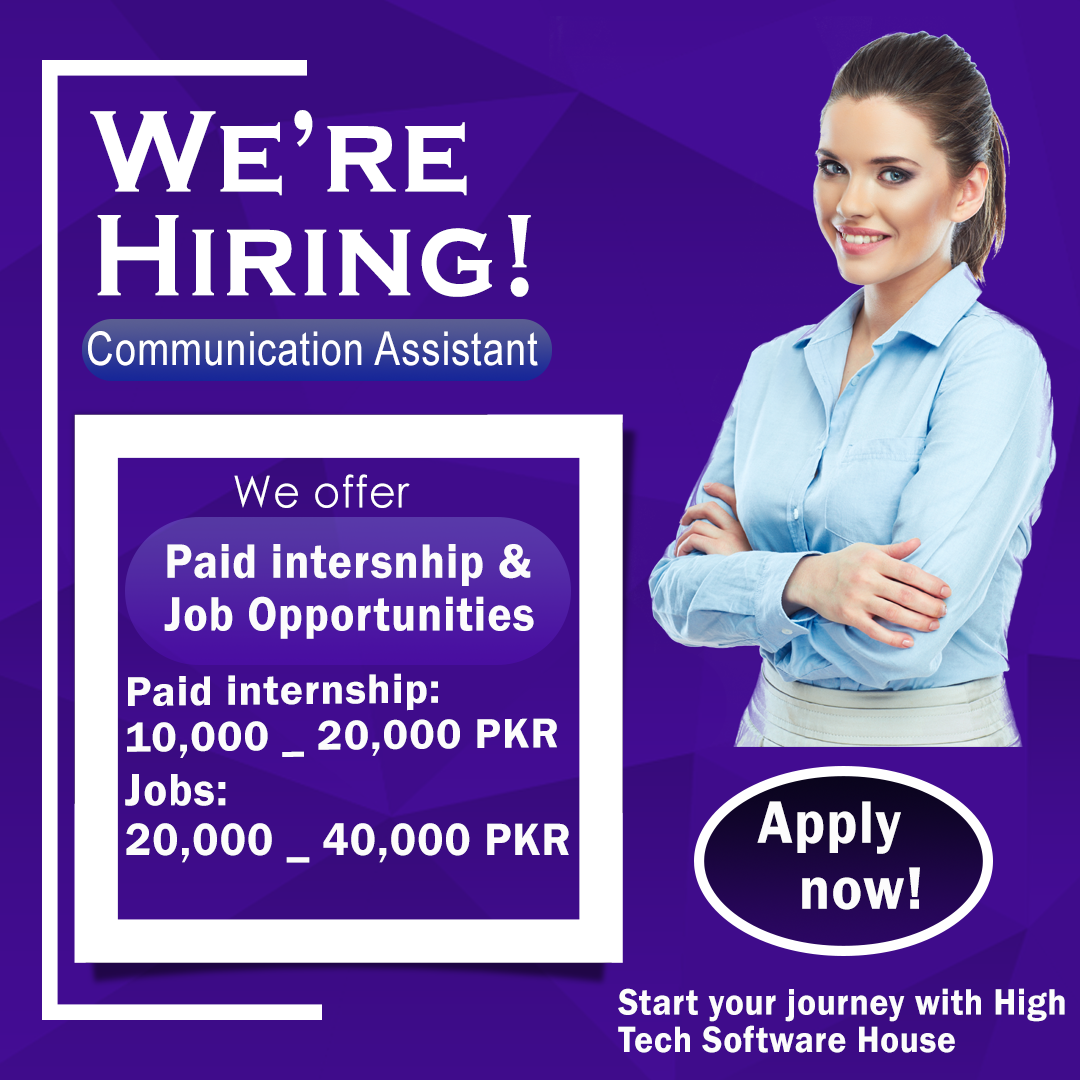
<style>
.page{position:relative;width:1080px;height:1080px}
.page>*{position:absolute;margin:0}
.t1{font:119.7px/103.7px "CopperplateGothic-Bold";letter-spacing:0.025em;color:#ffffff;scale:0.91 1}
.t2{font:44.3px "CenturyGothic";letter-spacing:0.025em;color:#ffffff;scale:0.93 1}
.t3{font:49.8px/52.9px "FranklinGothic-Demi";letter-spacing:0.025em;color:#fcfcfc;scale:0.92 1}
.t4{font:43.1px/45.8px "FranklinGothic-Demi";letter-spacing:0.025em;color:#fcfcfc}
.t5{font:47px/50px "FranklinGothic-Demi";letter-spacing:0.025em;color:#fcfcfc;scale:0.95 1}
.t6{font:37.7px/37.5px "FranklinGothic-Demi";letter-spacing:0.025em;color:#fcfcfc;scale:0.93 1}
</style>
<div class="page">
<p class="t1" style="left:90px;top:110px;width:441px;height:187px">We’re <br>Hiring!</p>
<p class="t2" style="left:234px;top:474px;width:176px;height:34px">We offer</p>
<p class="t3" style="left:164px;top:544px;width:370px;height:95px">Paid intersnhip &amp;<br>Job Opportunities</p>
<p class="t4" style="left:127px;top:673px;width:430px;height:85px;rotate:-1deg">Paid internship:<br>10,000 _ 20,000 PKR</p>
<p class="t5" style="left:125px;top:774px;width:444px;height:89px">Jobs:<br>20,000 _ 40,000 PKR</p>
<p class="t6" style="left:618px;top:988px;width:447px;height:65px">Start your journey with High<br>Tech Software House</p>
</div>
